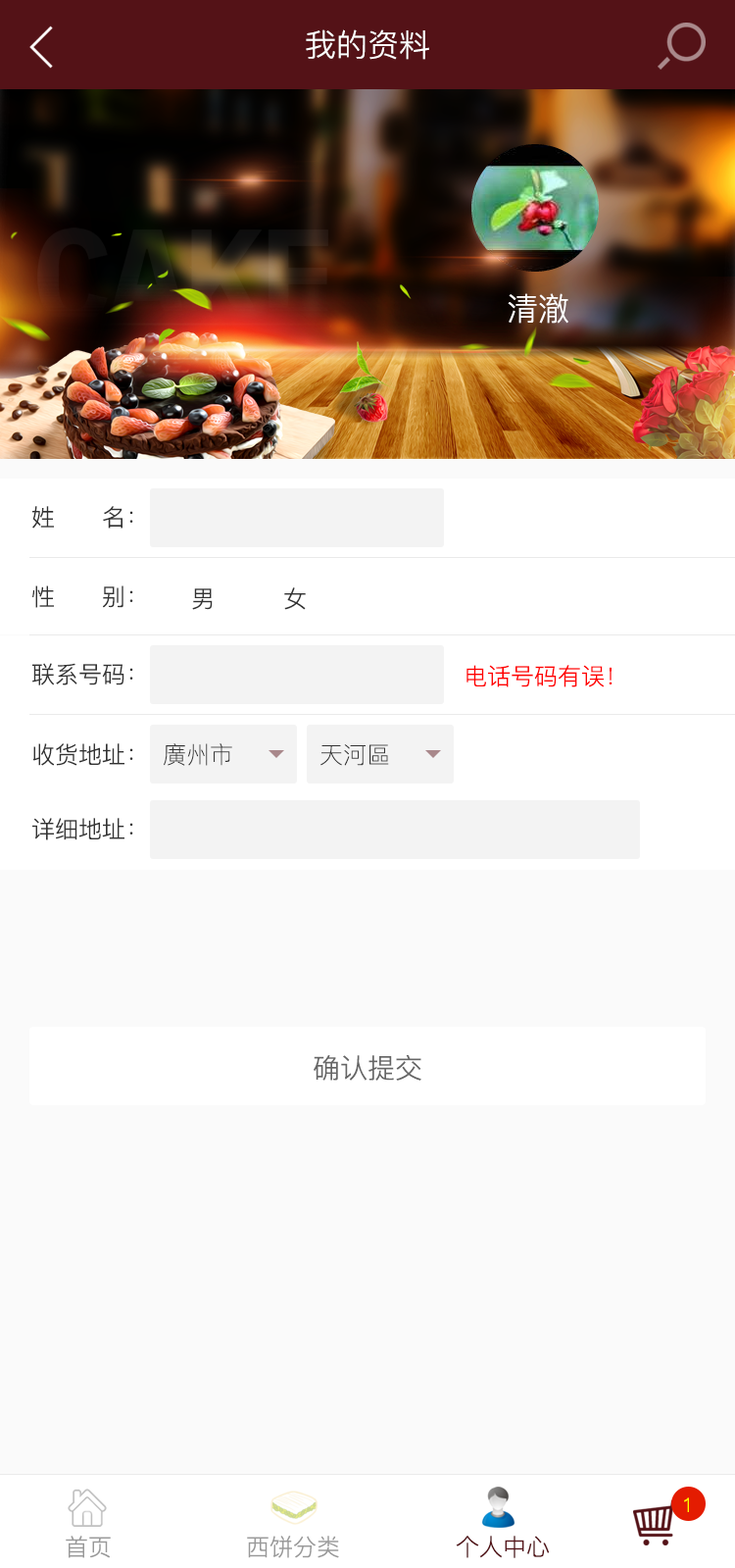
<style>
.page{position:relative;width:735px;height:1568px;background:#fafafa}
.page>*{position:absolute;margin:0}
.t1{font:31.4px "PingFang-SC-Regular";color:#ffffff}
.t2{font:23.5px "PingFang-SC-Regular";color:#333333}
.t3{font:23.5px "PingFang-SC-Regular";color:#ff0000}
.t4{font:23.5px "PingFang-SC-Light";color:#333333}
.t5{font:27.5px "PingFang-SC-Regular";color:#666666}
.t6{font:19.6px "PingFang-SC-Regular";color:#ffff00}
.t7{font:23.5px "PingFang-SC-Regular";color:#999999}
.t8{font:23.5px "PingFang-SC-Regular";color:#541217}
</style>
<div class="page">
<p class="t1" style="left:306px;top:29px;width:124px;height:31px">我的资料</p>
<p class="t1" style="left:508px;top:293px;width:61px;height:31px">清澈</p>
<p class="t2" style="left:32px;top:506px;width:101px;height:23px">姓      名：</p>
<p class="t2" style="left:32px;top:585px;width:101px;height:23px">性      别：</p>
<p class="t2" style="left:192px;top:588px;width:21px;height:22px">男</p>
<p class="t2" style="left:284px;top:587px;width:22px;height:23px">女</p>
<p class="t2" style="left:32px;top:663px;width:101px;height:22px">联系号码：</p>
<p class="t3" style="left:467px;top:665px;width:146px;height:22px">电话号码有误！</p>
<p class="t2" style="left:33px;top:743px;width:100px;height:23px">收货地址：</p>
<p class="t4" style="left:164px;top:743px;width:68px;height:23px">廣州市</p>
<p class="t4" style="left:321px;top:744px;width:68px;height:22px">天河區</p>
<p class="t2" style="left:32px;top:818px;width:101px;height:22px">详细地址：</p>
<p class="t5" style="left:314px;top:1055px;width:108px;height:26px">确认提交</p>
<p class="t6" style="left:684px;top:1497px;width:5px;height:15px">1</p>
<p class="t7" style="left:66px;top:1536px;width:45px;height:22px">首页</p>
<p class="t7" style="left:247px;top:1536px;width:92px;height:22px">西饼分类</p>
<p class="t8" style="left:456px;top:1536px;width:94px;height:22px">个人中心</p>
</div>
